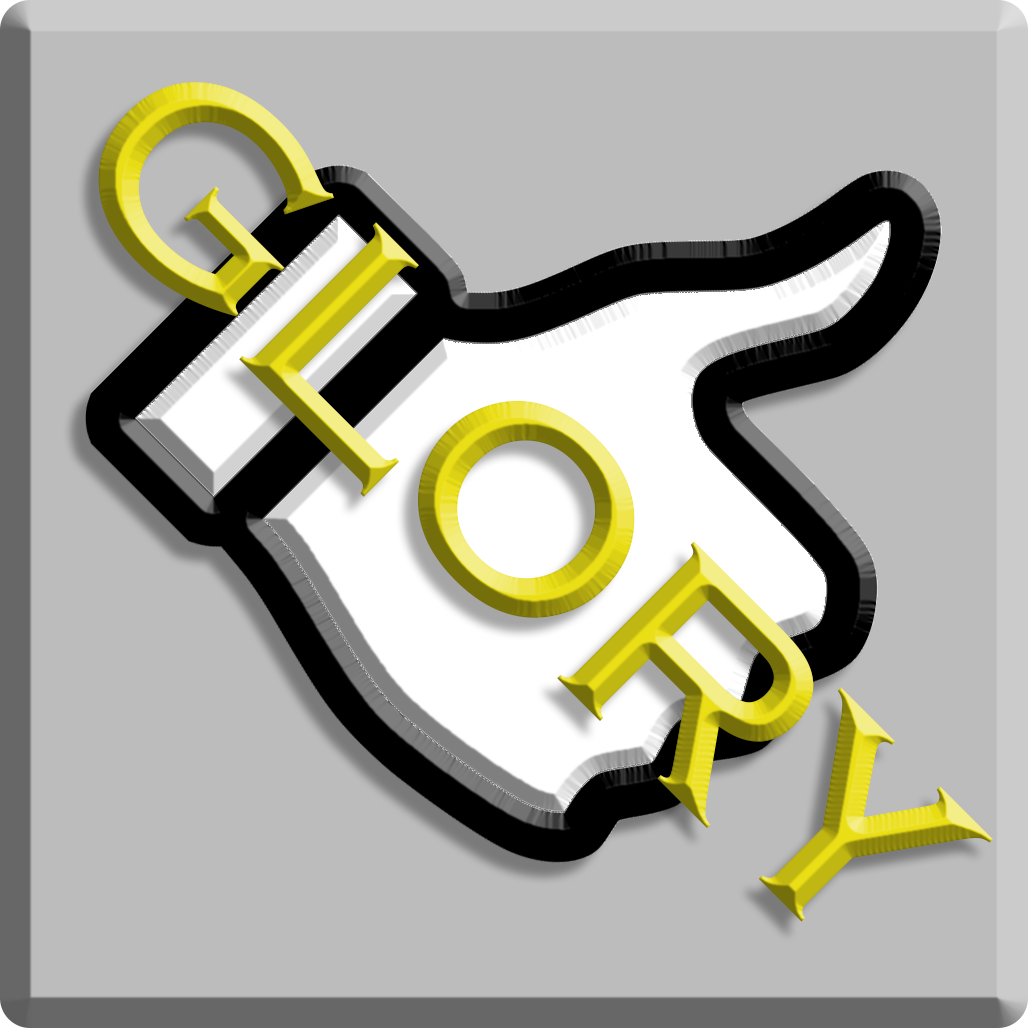
<style>
.page{position:relative;width:1028px;height:1028px;background:#bcbcbc}
.page>*{position:absolute;margin:0}
.t1{font:290.3px "CopperplateGothic-Bold"}
</style>
<div class="page">
<p class="t1" style="left:98px;top:82px;width:895px;height:840px;rotate:45deg">GLORY</p>
</div>
